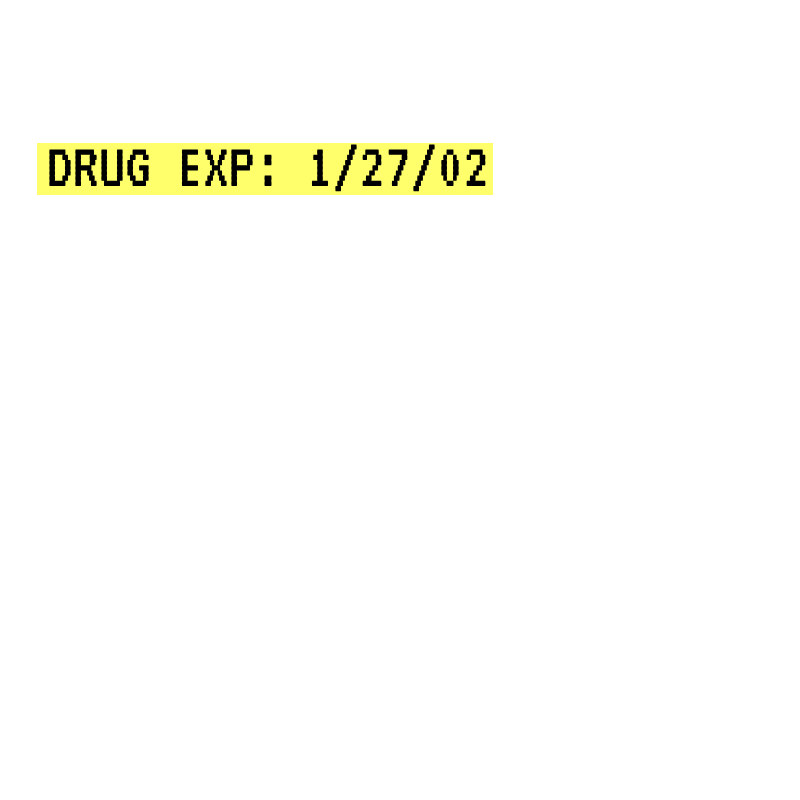
<style>
.page{position:relative;width:800px;height:800px;background:#ffffff}
.page>*{position:absolute;margin:0}
.t1{font:65px "VT323-Regular";color:#000000}
</style>
<div class="page">
<p class="t1" style="left:49px;top:144px;width:437px;height:48px">DRUG EXP: 1/27/02</p>
</div>
